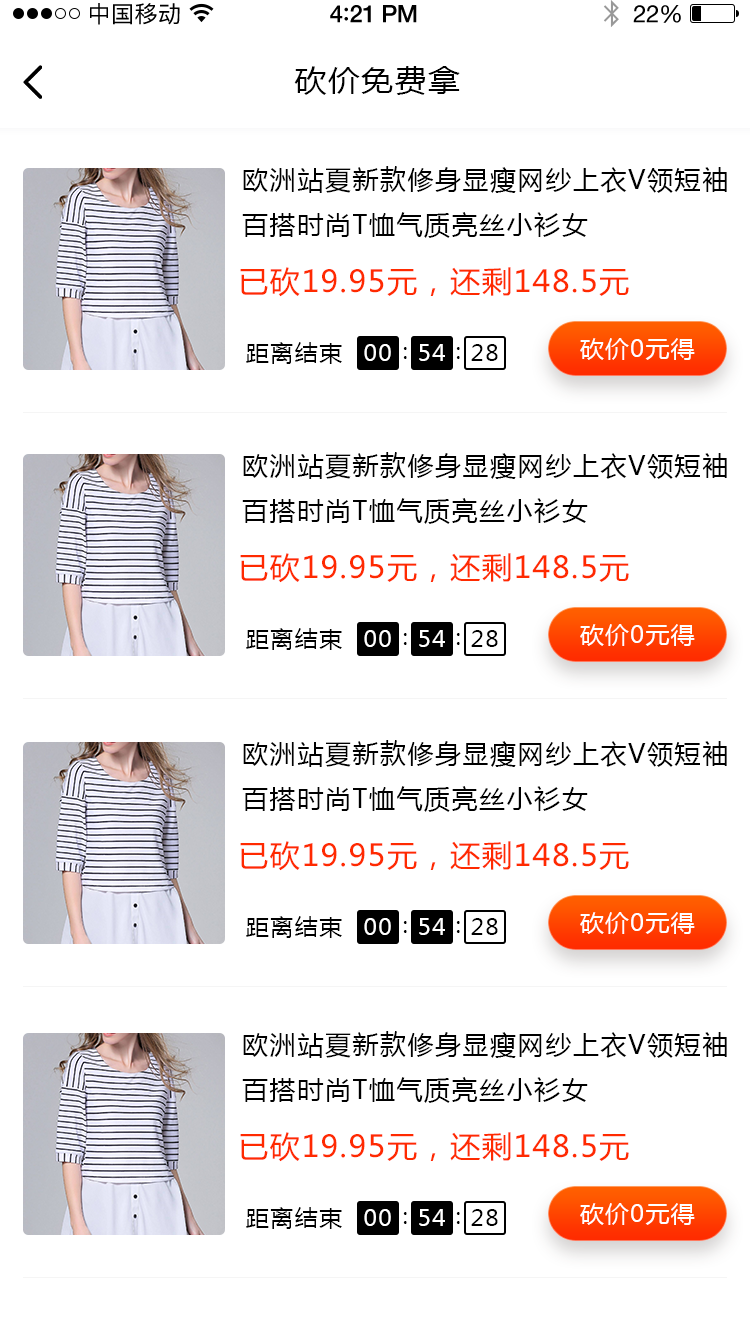
<style>
.page{position:relative;width:750px;height:1334px;background:#ffffff}
.page>*{position:absolute;margin:0}
.t1{font:23px "PingFangSC-Regular";letter-spacing:0.02em;color:#000000}
.t2{font:24px "HelveticaNeue-Medium";letter-spacing:-0.02em;color:#000000}
.t3{font:26px "Avenir-Medium";letter-spacing:-0.02em;color:#000000}
.t4{font:24px "HelveticaNeue";letter-spacing:-0.02em;color:#000000}
.t5{font:30px "MicrosoftYaHei";letter-spacing:0.05em;color:#000000;scale:1.06 1}
.t6{font:26px "MicrosoftYaHei";letter-spacing:0.06em;color:#000000;text-transform:uppercase}
.t7{font:30px "MicrosoftYaHei";letter-spacing:0.05em;color:#ff2a00;text-transform:uppercase}
.t8{font:22px "MicrosoftYaHei";letter-spacing:0.05em;color:#000000;scale:1.06 1}
.t9{font:24px "MicrosoftYaHei";letter-spacing:0.05em;color:#ffffff;text-transform:uppercase}
.t10{font:22px "MicrosoftYaHei";letter-spacing:0.05em;color:#ffffff;scale:1.06 1}
</style>
<div class="page">
<p class="t1" style="left:90px;top:3px;width:90px;height:22px">中国移动</p>
<p class="t2" style="left:330px;top:5px;width:87px;height:18px">4<span class="t3">:</span>21 PM</p>
<p class="t4" style="left:633px;top:5px;width:48px;height:18px">22%</p>
<p class="t5" style="left:294px;top:66px;width:166px;height:29px">砍价免费拿</p>
<p class="t6" style="left:242px;top:166px;width:485px;height:72px">欧洲站夏新款修身显瘦网纱上衣v领短袖百搭时尚t恤气质亮丝小衫女</p>
<p class="t7" style="left:240px;top:267px;width:389px;height:30px">已砍19.95元，还剩148.5元</p>
<p class="t8" style="left:246px;top:342px;width:96px;height:22px">距离结束</p>
<p class="t9" style="left:580px;top:338px;width:115px;height:22px">砍价0元得</p>
<p class="t10" style="left:364px;top:344px;width:27px;height:17px">00</p>
<p class="t8" style="left:403px;top:347px;width:4px;height:12px">：</p>
<p class="t10" style="left:419px;top:344px;width:26px;height:17px">54</p>
<p class="t8" style="left:456px;top:347px;width:4px;height:12px">：</p>
<p class="t8" style="left:471px;top:344px;width:27px;height:17px">28</p>
<p class="t6" style="left:242px;top:452px;width:485px;height:72px">欧洲站夏新款修身显瘦网纱上衣v领短袖百搭时尚t恤气质亮丝小衫女</p>
<p class="t7" style="left:240px;top:553px;width:389px;height:30px">已砍19.95元，还剩148.5元</p>
<p class="t8" style="left:246px;top:628px;width:96px;height:22px">距离结束</p>
<p class="t10" style="left:364px;top:630px;width:27px;height:17px">00</p>
<p class="t10" style="left:419px;top:630px;width:26px;height:17px">54</p>
<p class="t8" style="left:471px;top:630px;width:27px;height:17px">28</p>
<p class="t9" style="left:580px;top:624px;width:115px;height:22px">砍价0元得</p>
<p class="t8" style="left:403px;top:633px;width:4px;height:12px">：</p>
<p class="t8" style="left:456px;top:633px;width:4px;height:12px">：</p>
<p class="t6" style="left:242px;top:740px;width:485px;height:72px">欧洲站夏新款修身显瘦网纱上衣v领短袖百搭时尚t恤气质亮丝小衫女</p>
<p class="t7" style="left:240px;top:841px;width:389px;height:30px">已砍19.95元，还剩148.5元</p>
<p class="t8" style="left:246px;top:916px;width:96px;height:22px">距离结束</p>
<p class="t10" style="left:364px;top:918px;width:27px;height:17px">00</p>
<p class="t10" style="left:419px;top:918px;width:26px;height:17px">54</p>
<p class="t8" style="left:471px;top:918px;width:27px;height:17px">28</p>
<p class="t9" style="left:580px;top:912px;width:115px;height:22px">砍价0元得</p>
<p class="t8" style="left:403px;top:921px;width:4px;height:12px">：</p>
<p class="t8" style="left:456px;top:921px;width:4px;height:12px">：</p>
<p class="t6" style="left:242px;top:1031px;width:485px;height:72px">欧洲站夏新款修身显瘦网纱上衣v领短袖百搭时尚t恤气质亮丝小衫女</p>
<p class="t7" style="left:240px;top:1132px;width:389px;height:30px">已砍19.95元，还剩148.5元</p>
<p class="t9" style="left:580px;top:1203px;width:115px;height:22px">砍价0元得</p>
<p class="t8" style="left:246px;top:1207px;width:96px;height:22px">距离结束</p>
<p class="t10" style="left:364px;top:1209px;width:27px;height:17px">00</p>
<p class="t8" style="left:403px;top:1212px;width:4px;height:12px">：</p>
<p class="t10" style="left:419px;top:1209px;width:26px;height:17px">54</p>
<p class="t8" style="left:456px;top:1212px;width:4px;height:12px">：</p>
<p class="t8" style="left:471px;top:1209px;width:27px;height:17px">28</p>
</div>
